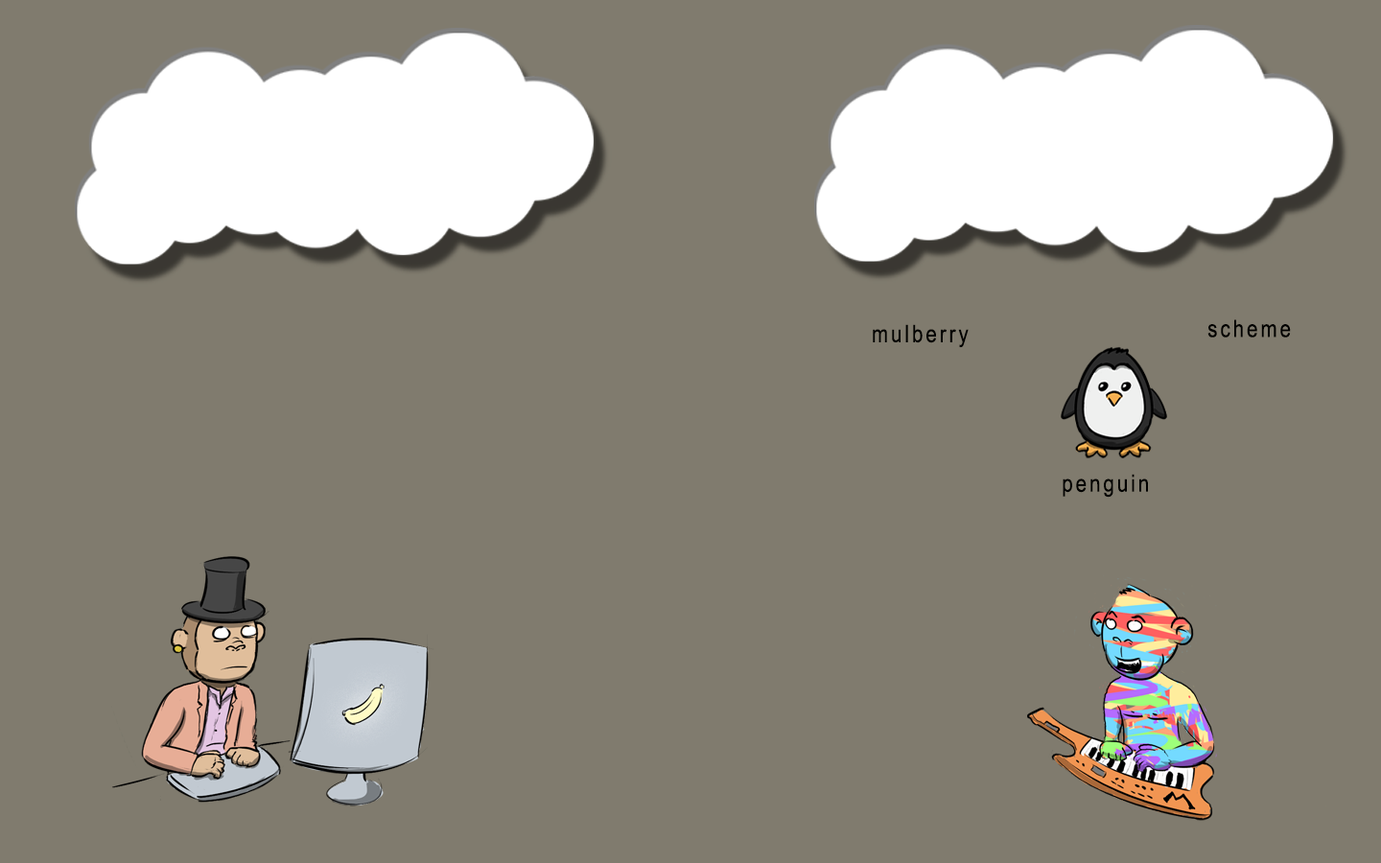
<style>
.page{position:relative;width:1381px;height:863px;background:#807b6e}
.page>*{position:absolute;margin:0}
.t1{font:24px "ArialNarrow";letter-spacing:0.12em;color:#010100}
</style>
<div class="page">
<p class="t1" style="left:873px;top:324px;width:96px;height:24px">mulberry</p>
<p class="t1" style="left:1208px;top:319px;width:83px;height:19px">scheme</p>
<p class="t1" style="left:1063px;top:474px;width:85px;height:24px">penguin</p>
</div>
